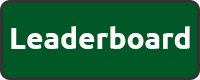
<style>
.page{position:relative;width:200px;height:80px;background:#005826}
.page>*{position:absolute;margin:0}
.t1{font:30px "Ubuntu-Bold";color:#ffffff}
</style>
<div class="page">
<p class="t1" style="left:11px;top:26px;width:179px;height:23px">Leaderboard</p>
</div>
